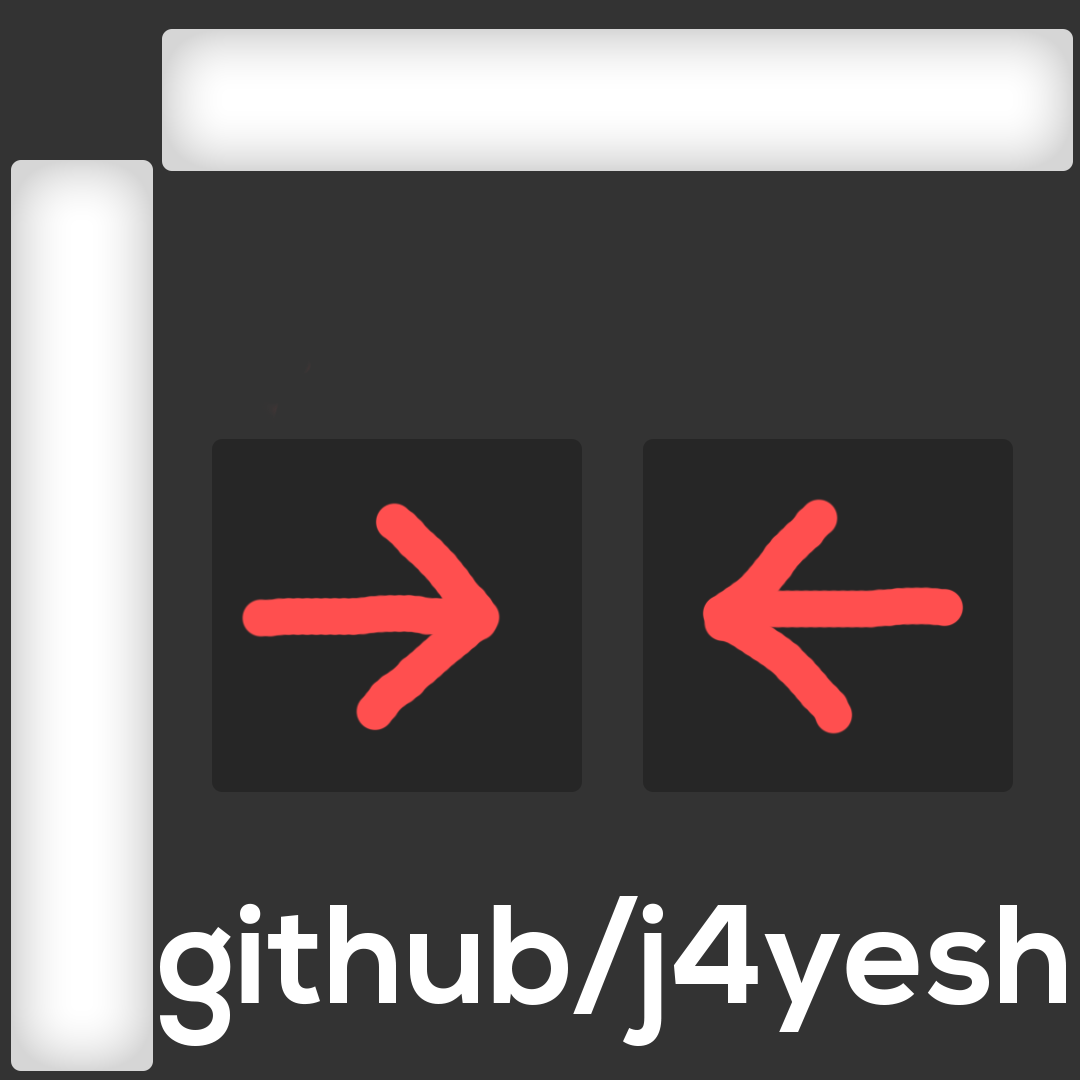
<style>
.page{position:relative;width:1080px;height:1080px;background:#333333}
.page>*{position:absolute;margin:0}
.t1{font:140px "NexaBold";color:#ffffff}
</style>
<div class="page">
<p class="t1" style="left:160px;top:896px;width:906px;height:150px">github/j4yesh</p>
</div>
